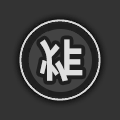
<style>
.page{position:relative;width:120px;height:120px;background:#333333}
.page>*{position:absolute;margin:0}
.t1{font:45px "HarmonyOS_Sans_SC_Bold";letter-spacing:0.005em;color:#f1e3cb}
</style>
<div class="page">
<p class="t1" style="left:40px;top:39px;width:43px;height:43px">炸</p>
</div>
